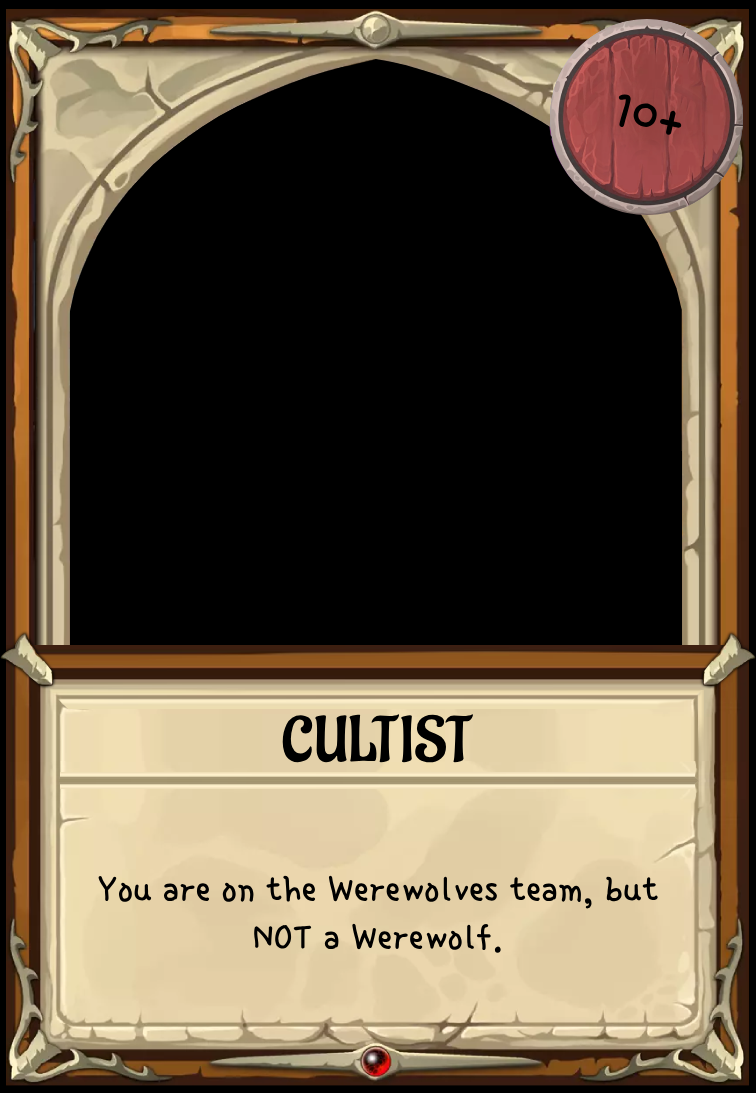
<style>
.page{position:relative;width:756px;height:1093px;background:#000000}
.page>*{position:absolute;margin:0}
.t1{font:59.1px "SingleDay-Regular";color:#000000}
.t2{font:64px "Aladin-Regular";color:#000000}
.t3{font:40px "SingleDay-Regular";color:#000000}
</style>
<div class="page">
<p class="t1" style="left:618px;top:94px;width:64px;height:41px;rotate:13deg">10+</p>
<p class="t2" style="left:282px;top:714px;width:191px;height:50px">CULTIST</p>
<p class="t3" style="left:98px;top:875px;width:560px;height:78px;text-align:center">You are on the Werewolves team, but<br>NOT a Werewolf.</p>
</div>
